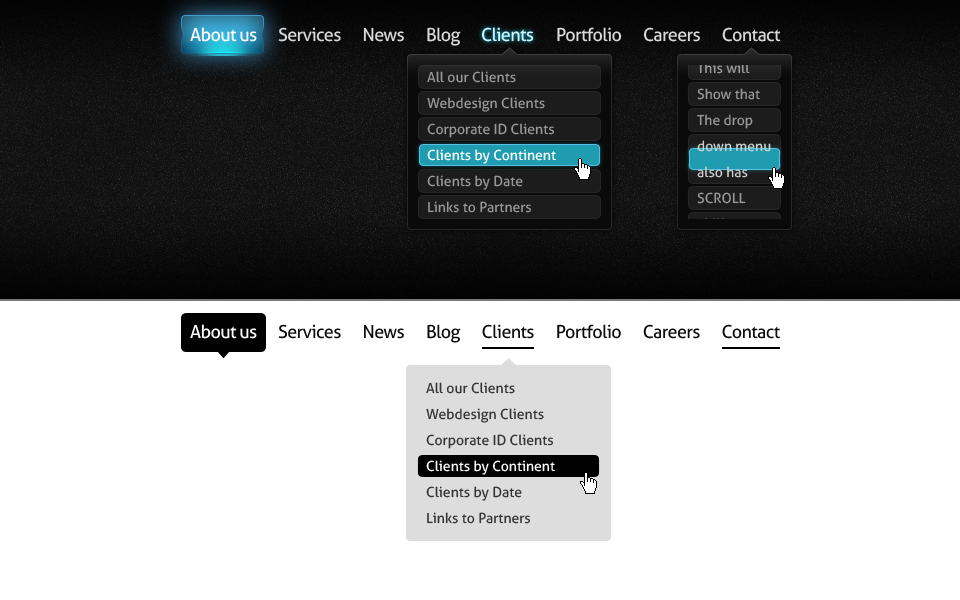
<style>
.page{position:relative;width:960px;height:600px;background:#ffffff}
.page>*{position:absolute;margin:0}
.t1{font:18px "Aller";letter-spacing:-0.035em;color:#ffffff}
.t2{font:18px "Aller";letter-spacing:-0.035em;color:#d8d9d9}
.t3{font:18px "Aller";letter-spacing:-0.035em;color:#d3f3ff}
.t4{font:18px "Aller";letter-spacing:-0.035em;color:#d9d9d9}
.t5{font:14px "Aller";color:#989898}
.t6{font:14px "Aller";color:#ffffff}
.t7{font:18px "Aller";letter-spacing:-0.035em;color:#0c0c0c}
.t8{font:14px "Aller";color:#343434}
</style>
<div class="page">
<p class="t1" style="left:190px;top:27px;width:67px;height:15px">About us</p>
<p class="t2" style="left:278px;top:27px;width:183px;height:19px">Services      News      Blog</p>
<p class="t3" style="left:481px;top:27px;width:53px;height:15px">Clients</p>
<p class="t4" style="left:557px;top:27px;width:224px;height:15px">Portfolio      Careers      Contact</p>
<p class="t5" style="left:427px;top:71px;width:89px;height:12px">All our Clients</p>
<p class="t5" style="left:427px;top:97px;width:118px;height:15px">Webdesign Clients</p>
<p class="t5" style="left:427px;top:123px;width:127px;height:15px">Corporate ID Clients</p>
<p class="t6" style="left:427px;top:149px;width:129px;height:15px">Clients by Continent</p>
<p class="t5" style="left:427px;top:175px;width:96px;height:15px">Clients by Date</p>
<p class="t5" style="left:428px;top:201px;width:103px;height:12px">Links to Partners</p>
<p class="t1" style="left:190px;top:324px;width:67px;height:15px">About us</p>
<p class="t7" style="left:278px;top:324px;width:502px;height:19px">Services      News      Blog      Clients      Portfolio      Careers      Contact</p>
<p class="t8" style="left:426px;top:382px;width:89px;height:12px">All our Clients</p>
<p class="t8" style="left:426px;top:408px;width:118px;height:15px">Webdesign Clients</p>
<p class="t8" style="left:426px;top:434px;width:127px;height:15px">Corporate ID Clients</p>
<p class="t6" style="left:426px;top:460px;width:129px;height:15px">Clients by Continent</p>
<p class="t8" style="left:426px;top:486px;width:96px;height:15px">Clients by Date</p>
<p class="t8" style="left:427px;top:512px;width:103px;height:12px">Links to Partners</p>
</div>
